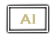
<style>
.page{position:relative;width:56px;height:42px;background:#ffffff}
.page>*{position:absolute;margin:0}
.t1{font:14px "CopperplateGothic-Bold";color:#c8bc87}
</style>
<div class="page">
<p class="t1" style="left:19px;top:14px;width:17px;height:10px">AI</p>
</div>
